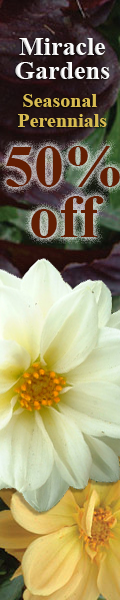
<style>
.page{position:relative;width:120px;height:600px}
.page>*{position:absolute;margin:0}
.t1{font:26px/24px "TimesNewRomanPS-BoldMT";color:#ffffff}
.t2{font:20px/20px "TimesNewRomanPS-BoldMT";color:#d7bb51}
.t3{font:60px/50px "TimesNewRomanPS-BoldMT";color:#621e03}
</style>
<div class="page">
<p class="t1" style="left:15px;top:38px;width:95px;height:41px;text-align:center">Miracle<br>Gardens</p>
<p class="t2" style="left:18px;top:94px;width:89px;height:33px;text-align:center">Seasonal <br>Perennials</p>
<p class="t3" style="left:6px;top:146px;width:114px;height:92px;text-align:center">50%<br>off</p>
</div>
